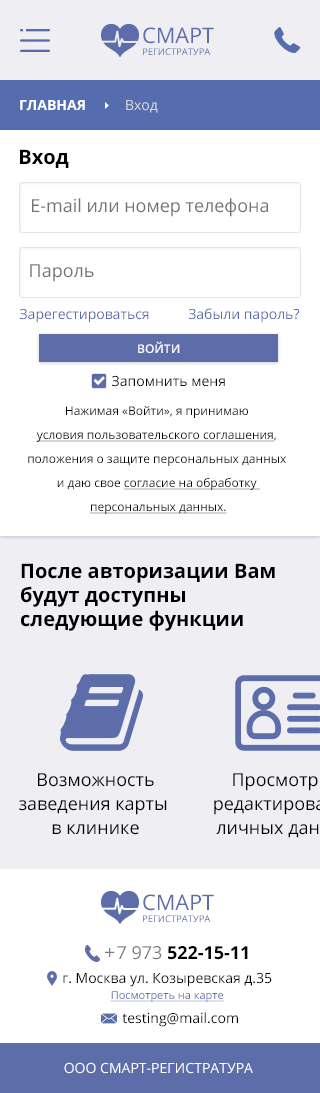
<style>
.page{position:relative;width:320px;height:1093px;background:#ffffff}
.page>*{position:absolute;margin:0}
.t1{font:9.3px/11.5px "OpenSans";color:#5d6daa}
.t2{font:21.5px/11.5px "OpenSans";color:#5d6daa}
.t3{font:14px "OpenSans-Bold";color:#ffffff}
.t4{font:14px "OpenSans";color:#d8d8d8}
.t5{font:20px "OpenSans-Bold";color:#000000}
.t6{font:18px "OpenSans";color:#727272}
.t7{font:14px "OpenSans";color:#5d6daa}
.t8{font:12px "OpenSans-Semibold";color:#ffffff;text-transform:uppercase}
.t9{font:14px "OpenSans";color:#000000}
.t10{font:12px/24px "OpenSans";color:#000000}
.t11{font:12px/24px "OpenSans";color:#000000;text-decoration:underline}
.t12{font:18px/24px "OpenSans";color:#000000}
.t13{font:18px "HelveticaNeue";color:#7b7b81}
.t14{font:18px "OpenSans-Bold";color:#000000}
.t15{font:18px "OpenSans";color:#000000}
.t16{font:18px "OpenSans";color:#7b7b81}
.t17{font:14px/14px "OpenSans";color:#000000}
.t18{font:11px/16px "OpenSans";color:#5d6daa;text-decoration:underline}
.t19{font:14px "OpenSans";color:#ffffff}
</style>
<div class="page">
<p class="t1" style="left:143px;top:27px;width:71px;height:28px"><span class="t2">CМАРТ<br></span>РЕГИСТРАТУРА</p>
<p class="t3" style="left:20px;top:100px;width:138px;height:13px">ГЛАВНАЯ          <span class="t4">Вход</span></p>
<p class="t5" style="left:20px;top:149px;width:49px;height:19px">Вход</p>
<p class="t6" style="left:32px;top:198px;width:236px;height:19px">E-mail или номер телефона</p>
<p class="t6" style="left:30px;top:264px;width:64px;height:18px">Пароль</p>
<p class="t7" style="left:20px;top:308px;width:129px;height:15px">Зарегестироваться</p>
<p class="t7" style="left:188px;top:308px;width:112px;height:15px">Забыли пароль?</p>
<p class="t8" style="left:138px;top:341px;width:42px;height:12px">Войти</p>
<p class="t9" style="left:112px;top:375px;width:113px;height:12px">Запомнить меня</p>
<p class="t10" style="left:28px;top:406px;width:258px;height:108px;text-align:center">Нажимая «Войти», я принимаю <br><span class="t11">условия пользовательского соглашения</span>, <br>положения о защите персональных данных <br>и даю свое <span class="t11">согласие на обработку <br>персональных данных.</span></p>
<p class="t5" style="left:21px;top:563px;width:254px;height:68px">После авторизации Вам <br>будут доступны <br>следующие функции</p>
<p class="t12" style="left:19px;top:773px;width:148px;height:62px;text-align:center">Возможность<br>заведения карты <br>в клинике</p>
<p class="t1" style="left:143px;top:894px;width:71px;height:28px"><span class="t2">CМАРТ<br></span>РЕГИСТРАТУРА</p>
<p class="t13" style="left:105px;top:948px;width:10px;height:9px">+</p>
<p class="t14" style="left:117px;top:946px;width:131px;height:14px"><span class="t15">  </span><span class="t16">7 973 </span>522-15-11</p>
<p class="t17" style="left:63px;top:972px;width:209px;height:30px;text-align:center">г. Москва ул. Козыревская д.35<br><span class="t18">Посмотреть на карте</span></p>
<p class="t9" style="left:122px;top:1012px;width:116px;height:15px">testing@mail.com</p>
<p class="t19" style="left:64px;top:1062px;width:189px;height:12px">ООО СМАРТ-РЕГИСТРАТУРА</p>
</div>
